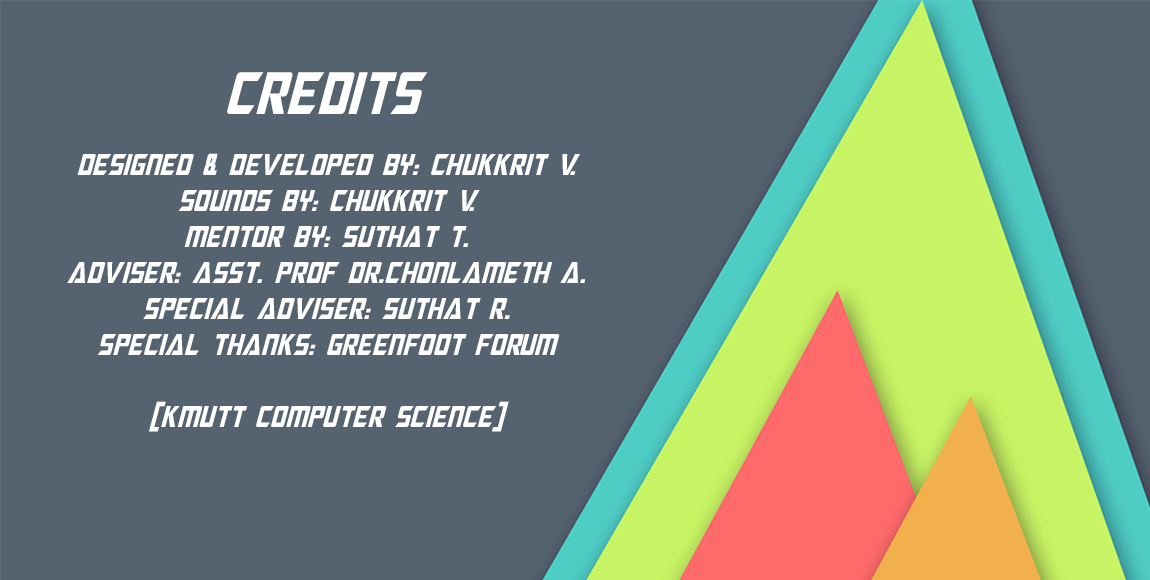
<style>
.page{position:relative;width:1150px;height:580px;background:#556270}
.page>*{position:absolute;margin:0}
.t1{font:60px "MegatronCondensed-Italic";color:#ffffff}
.t2{font:30px "MegatronCondensed-Italic";color:#ffffff}
</style>
<div class="page">
<p class="t1" style="left:227px;top:72px;width:201px;height:42px">credits</p>
<p class="t2" style="left:67px;top:153px;width:519px;height:279px;text-align:center">designed &amp; DEVELOped by: chukkrit v.<br>SOUnds by: chukkrit v.<br>mentor by: suthat t.<br>Adviser: asst. prof dr.chonlameth a.<br>special adviser: suthat r.<br>special thanks: greenfoot forum<br><br>[kmutt computer science]</p>
</div>
